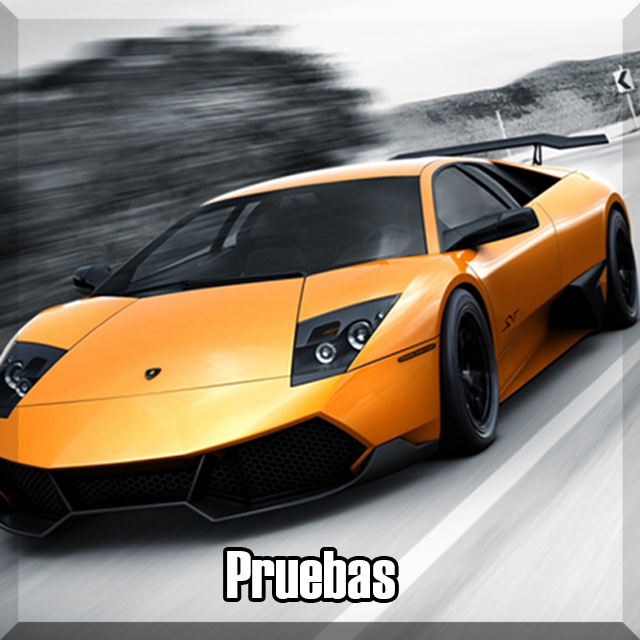
<style>
.page{position:relative;width:640px;height:640px}
.page>*{position:absolute;margin:0}
.t1{font:67.4px "Haettenschweiler";color:#ffffff}
</style>
<div class="page">
<p class="t1" style="left:227px;top:551px;width:168px;height:48px">Pruebas</p>
</div>
